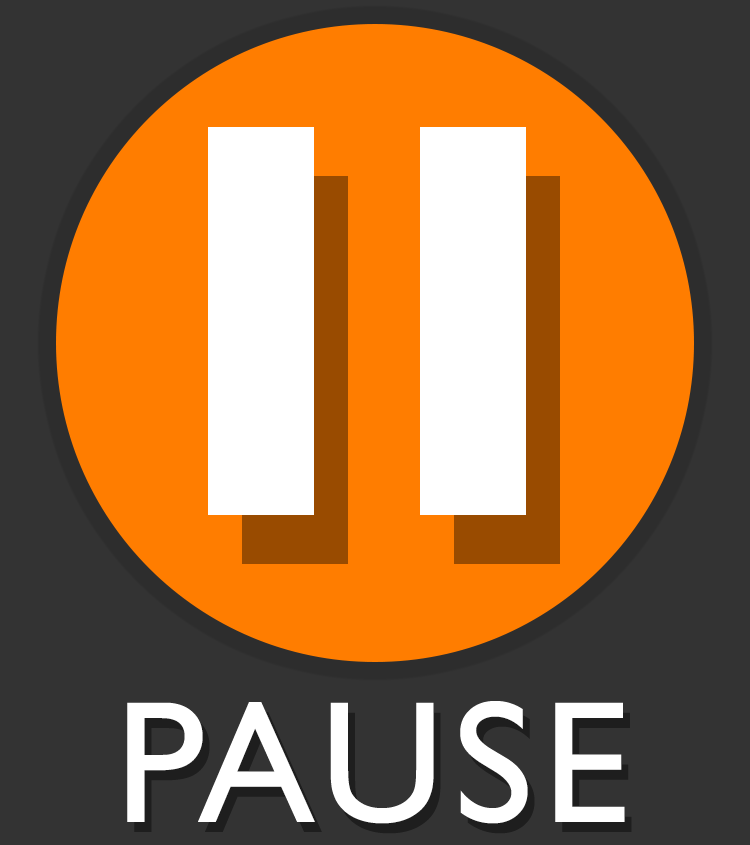
<style>
.page{position:relative;width:750px;height:845px;background:#333333}
.page>*{position:absolute;margin:0}
.t1{font:175px "GillSansMT";letter-spacing:0.05em;color:#ffffff}
</style>
<div class="page">
<p class="t1" style="left:127px;top:701px;width:498px;height:123px">PAUSE</p>
</div>
